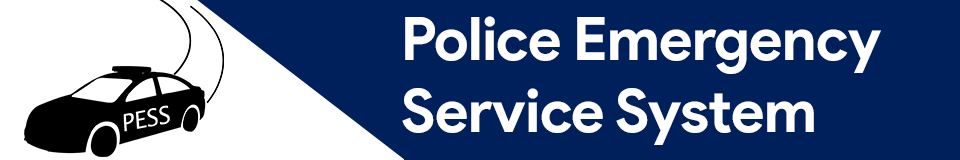
<style>
.page{position:relative;width:960px;height:160px;background:#00205b}
.page>*{position:absolute;margin:0}
.t1{font:60px "ProductSans-Bold";letter-spacing:-0.01em;color:#ffffff}
</style>
<div class="page">
<p class="t1" style="left:402px;top:16px;width:479px;height:129px">Police Emergency Service System</p>
</div>
